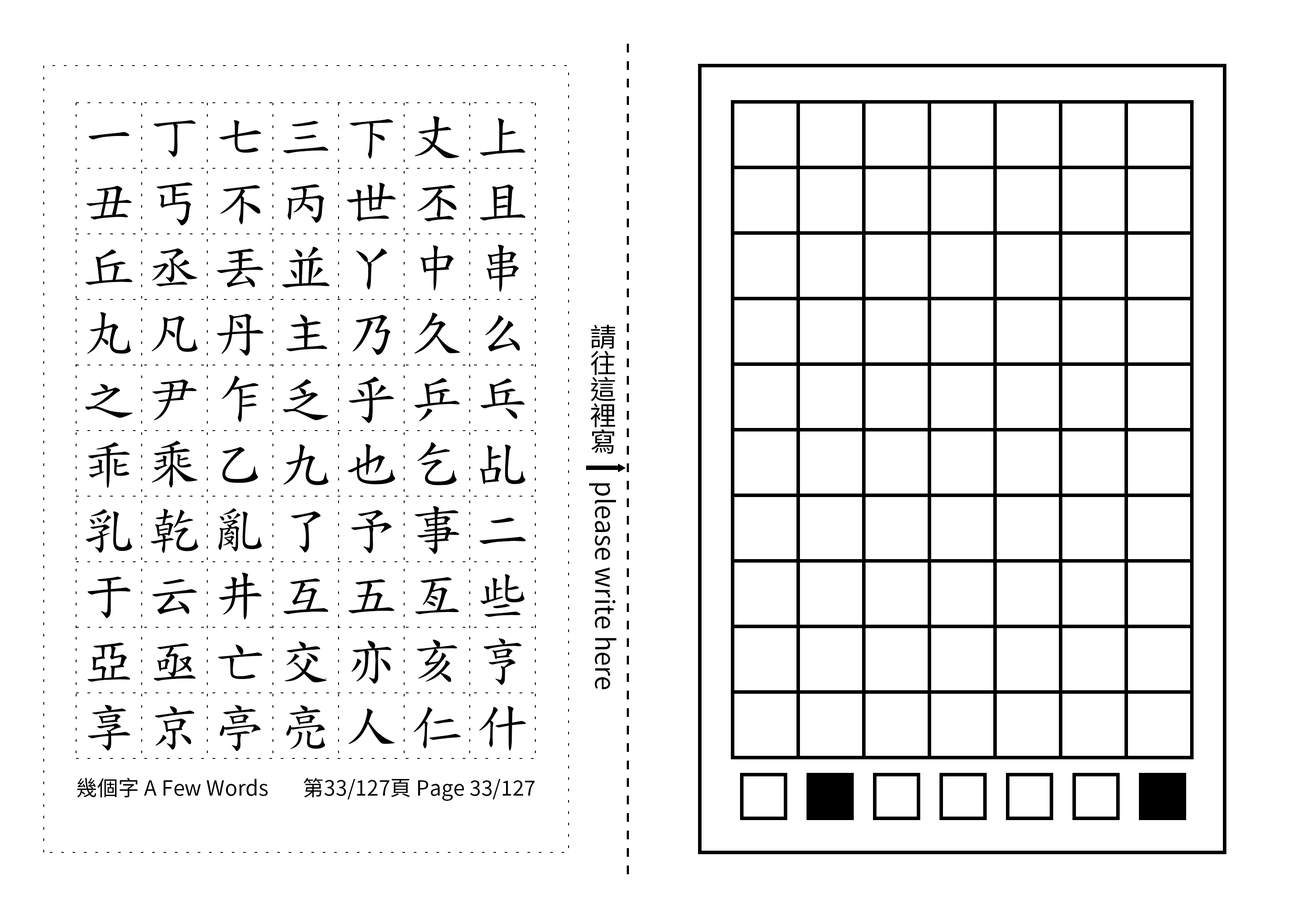
<style>
.page{position:relative;width:1299px;height:918px;background:#ffffff}
.page>*{position:absolute;margin:0}
.t1{font:52.5px/65.6px "TW-Kai-98_1";letter-spacing:0.25em;color:#000000}
.t2{font:26.2px "SourceHanSansTC-Regular";color:#000000}
.t3{font:21px "SourceHanSansTC-Regular";color:#000000}
</style>
<div class="page">
<p class="t1" style="left:85px;top:116px;width:441px;height:636px;text-align:center">一丁七三下丈上丑丐不丙世丕且丘丞丟並丫中串丸凡丹主乃久么之尹乍乏乎乒乓乖乘乙九也乞乩乳乾亂了予事二于云井互五亙些亞亟亡交亦亥亨享京亭亮人仁什</p>
<p class="t2" style="left:589px;top:324px;width:28px;height:366px;text-align:center">請往這裡寫　please write here</p>
<p class="t3" style="left:77px;top:778px;width:191px;height:20px">幾個字 A Few Words</p>
<p class="t3" style="left:303px;top:778px;width:232px;height:23px">第33/127頁 Page 33/127</p>
</div>
